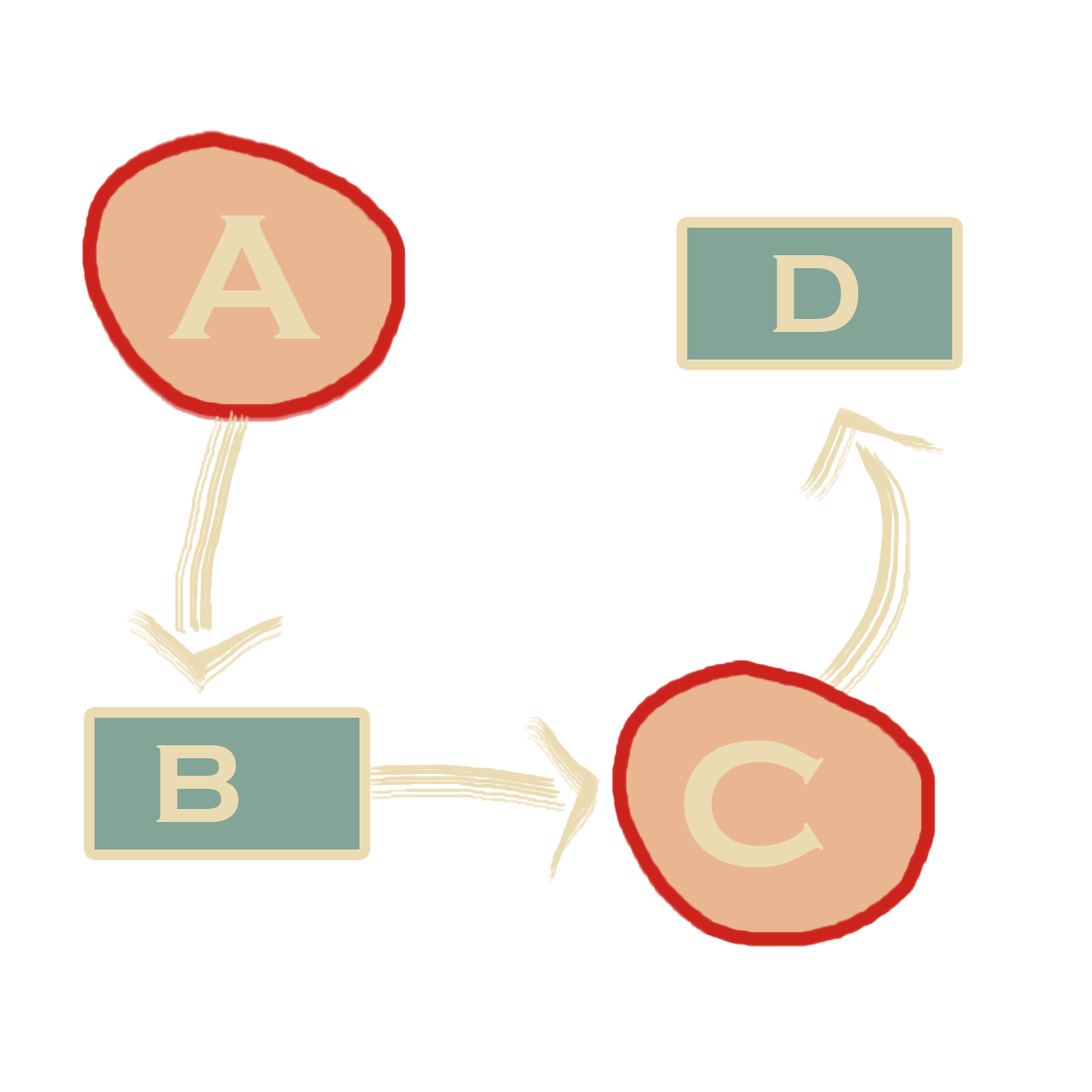
<style>
.page{position:relative;width:1092px;height:1092px;background:#ffffff}
.page>*{position:absolute;margin:0}
.t1{font:184.9px "CopperplateGothic-Bold";color:#ebdbb2}
.t2{font:115.6px "CopperplateGothic-Bold";color:#ebdbb2}
</style>
<div class="page">
<p class="t1" style="left:168px;top:215px;width:152px;height:123px">A</p>
<p class="t2" style="left:773px;top:255px;width:86px;height:77px">D</p>
<p class="t2" style="left:156px;top:745px;width:83px;height:77px">B</p>
<p class="t1" style="left:683px;top:740px;width:141px;height:127px">C</p>
</div>
